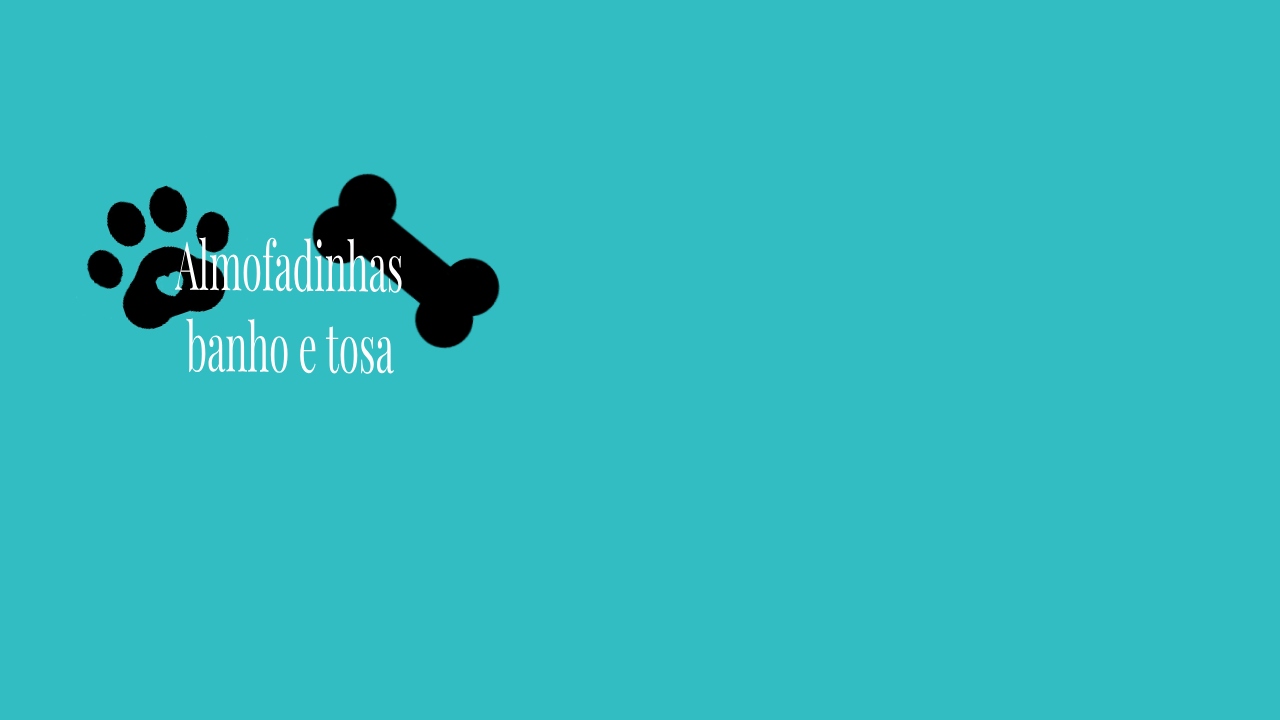
<style>
.page{position:relative;width:1280px;height:720px;background:#31bdc2}
.page>*{position:absolute;margin:0}
.t1{font:67.7px "PlayfairDisplay-Regular";color:#ffffff;scale:0.54 1}
.t2{font:67.7px "DelaGothicOne-Regular";color:#ffffff;scale:0.54 1}
</style>
<div class="page">
<p class="t1" style="left:175px;top:236px;width:227px;height:138px;rotate:1deg"><span class="t2"> </span>Almofadinhas<br>  banho e tosa</p>
</div>
